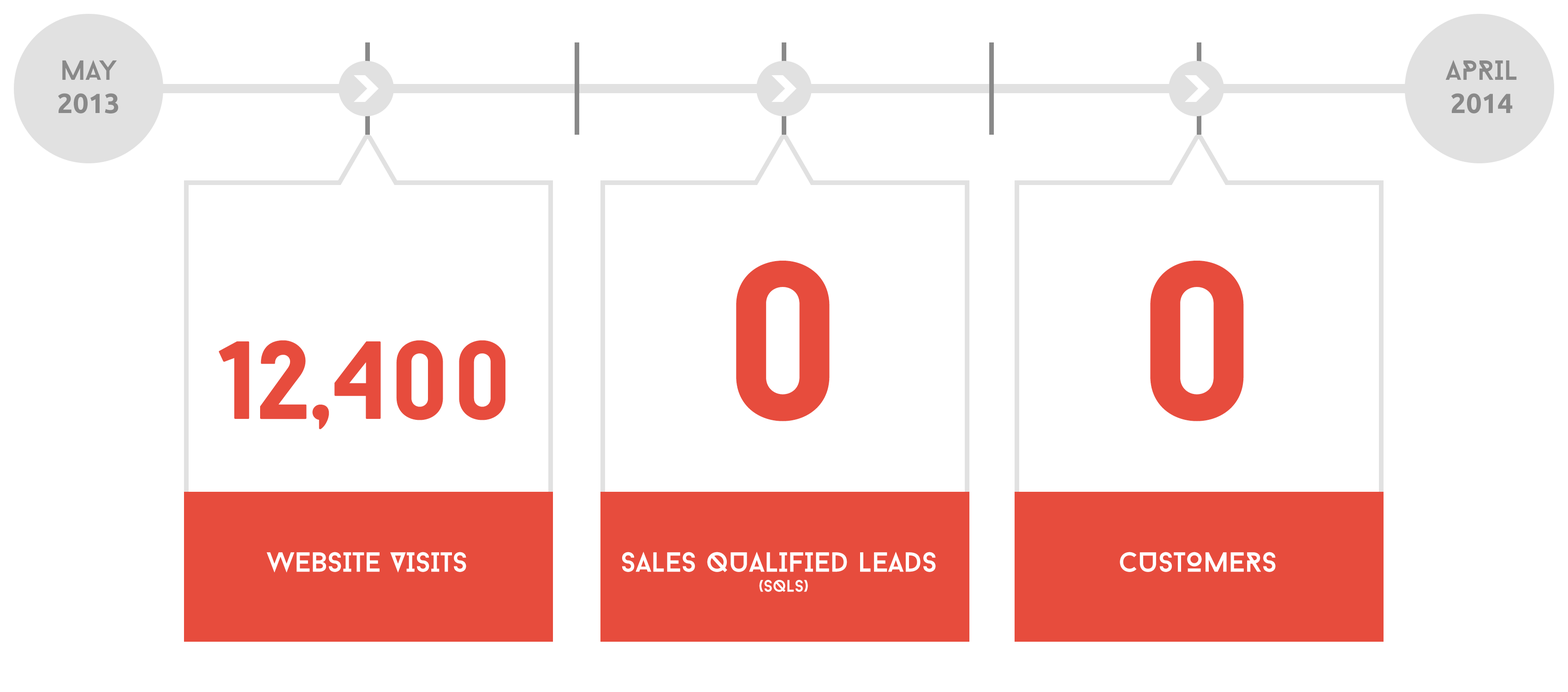
<style>
.page{position:relative;width:1568px;height:692px;background:#ffffff}
.page>*{position:absolute;margin:0}
.t1{font:27.7px "Ubuntu-Bold";color:#898989;text-transform:uppercase}
.t2{font:27.7px "BaronNeue";color:#898989;text-transform:uppercase}
.t3{font:27.7px "BaronNeue";color:#ffffff;text-transform:uppercase}
.t4{font:222.7px "BaronNeueBold";color:#e74c3d;text-transform:uppercase}
.t5{font:110.7px "BaronNeueBold";color:#e74c3d;text-transform:uppercase}
</style>
<div class="page">
<p class="t1" style="left:58px;top:59px;width:61px;height:54px;text-align:center"><span class="t2">May<br></span>2013</p>
<p class="t2" style="left:1445px;top:59px;width:72px;height:54px;text-align:center">april<br><span class="t1">2014</span></p>
<p class="t3" style="left:1120px;top:261px;width:156px;height:311px;text-align:center"><span class="t4">0<br><br><br><br></span>customers</p>
<p class="t3" style="left:219px;top:340px;width:286px;height:232px;text-align:center"><span class="t5">12,400<br><br><br><br></span>website Visits</p>
</div>
